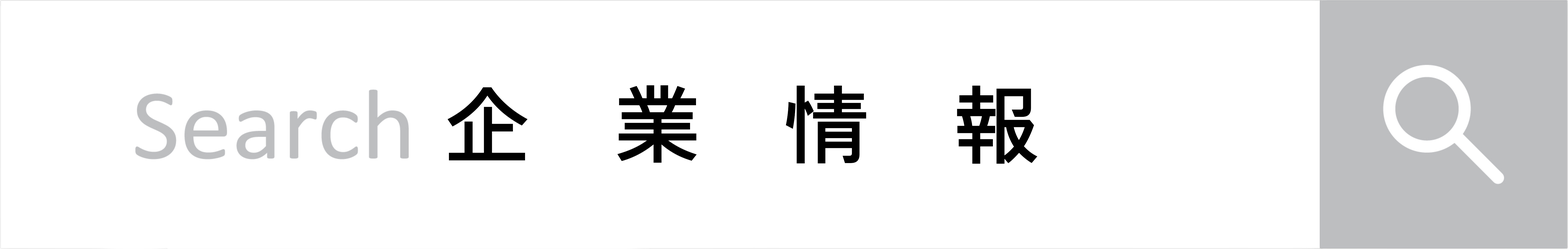
<style>
.page{position:relative;width:1568px;height:249px;background:#ffffff}
.page>*{position:absolute;margin:0}
.t1{font:84.9px "EPSON-FUTO-KAKUGO";color:#000000}
</style>
<div class="page">
<p class="t1" style="left:447px;top:85px;width:590px;height:79px">企　業　情　報</p>
</div>
